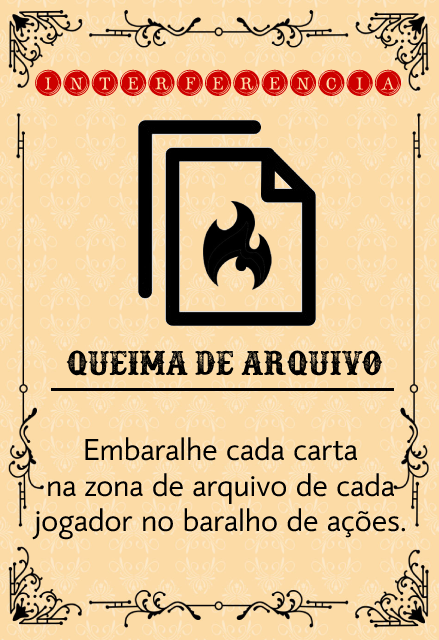
<style>
.page{position:relative;width:439px;height:640px;background:#fcdba6}
.page>*{position:absolute;margin:0}
.t1{font:35px "TypeKeysFilled";color:#cd0000}
.t2{font:38.4px "Docktrin";color:#000000}
.t3{font:29.5px "mirror82";color:#000000}
</style>
<div class="page">
<p class="t1" style="left:35px;top:69px;width:367px;height:27px">interferencia</p>
<p class="t2" style="left:66px;top:350px;width:317px;height:26px">queima de arquivo</p>
<p class="t3" style="left:32px;top:437px;width:374px;height:103px;text-align:center">Embaralhe cada carta<br>na zona de arquivo de cada<br>jogador no baralho de ações.</p>
</div>
